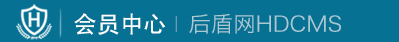
<style>
.page{position:relative;width:399px;height:42px;background:#067193}
.page>*{position:absolute;margin:0}
.t1{font:23.3px "AdobeHeitiStd-Regular";color:#ffffff}
.t2{font:14px "AdobeHeitiStd-Regular";color:#639fb5}
.t3{font:21.5px "HiraginoSansGB-W3";color:#aac9d5;scale:1.03 1}
</style>
<div class="page">
<p class="t1" style="left:74px;top:13px;width:92px;height:22px">会员中心</p>
<p class="t2" style="left:175px;top:16px;width:2px;height:16px">|</p>
<p class="t3" style="left:189px;top:13px;width:152px;height:21px">后盾网HDCMS</p>
</div>
